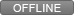
<style>
.page{position:relative;width:74px;height:15px}
.page>*{position:absolute;margin:0}
.t1{font:11px "ArialMT";letter-spacing:0.025em;color:#ffffff}
</style>
<div class="page">
<p class="t1" style="left:13px;top:4px;width:48px;height:8px">OFFLINE</p>
</div>
